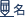
<style>
.page{position:relative;width:25px;height:17px;background:#ffffff}
.page>*{position:absolute;margin:0}
.t1{font:12px "KozGoPr6N-Regular";color:#20395f}
</style>
<div class="page">
<p class="t1" style="left:13px;top:3px;width:12px;height:13px">名</p>
</div>
